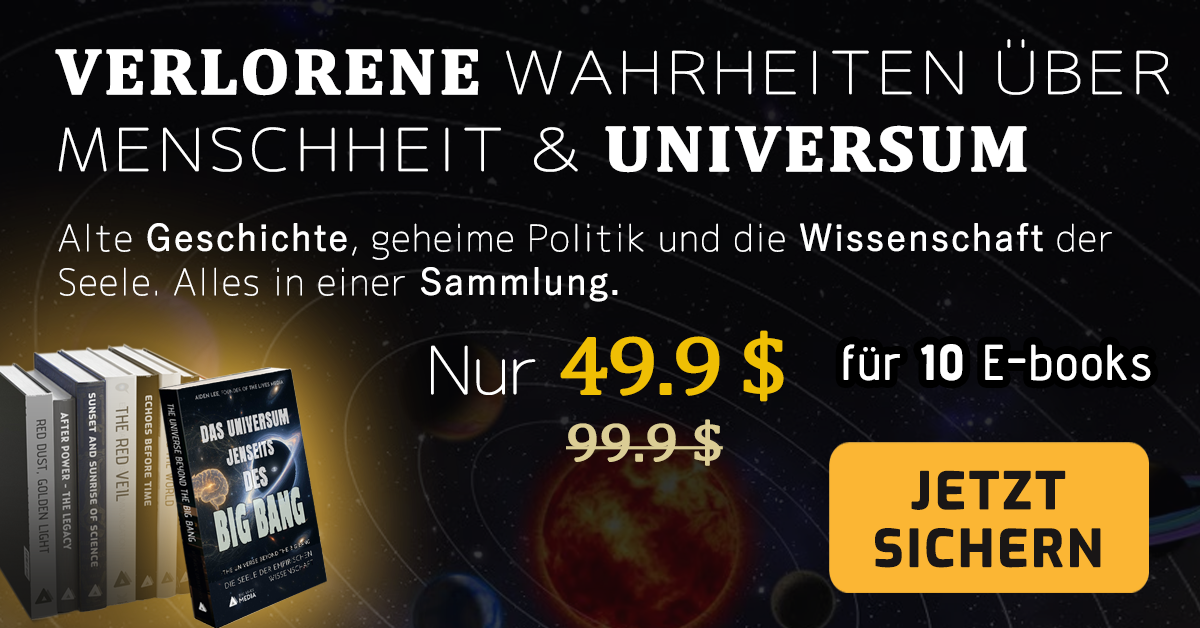
<style>
.page{position:relative;width:1200px;height:628px}
.page>*{position:absolute;margin:0}
.t1{font:57.6px/77px "Chogokuboso-Gothic";letter-spacing:0.025em;color:#ffffff;font-weight:bold;scale:1.22 1}
.t2{font:64.8px/77px "Cambria-Bold";letter-spacing:0.025em;color:#ffffff;font-weight:bold;scale:1.09 1}
.t3{font:36px/44px "Chogokuboso-Gothic";letter-spacing:0.025em;color:#ffffff;font-weight:bold}
.t4{font:36px/44px "YuGothic-Regular";letter-spacing:0.025em;color:#ffffff;font-weight:bold}
.t5{font:82.8px "Cambria";letter-spacing:-0.05em;color:#efbf04;font-weight:bold;scale:1.11 1}
.t6{font:64.8px "Chogokuboso-Gothic";letter-spacing:-0.05em;color:#ffffff;font-weight:bold;scale:1.11 1}
.t7{font:48px "AdventPro-Regular";letter-spacing:0.05em;color:#ffffff;font-weight:bold}
.t8{font:48px "AdventPro-Bold";letter-spacing:0.05em;color:#ffffff;font-weight:bold}
.t9{font:54px "Cambria";letter-spacing:-0.025em;color:#dbcd95;font-weight:bold;scale:1.11 1}
.t10{font:50.3px/57.5px "Exo-Bold";letter-spacing:0.05em;color:#191616;font-weight:bold}
</style>
<div class="page">
<p class="t1" style="left:55px;top:39px;width:1115px;height:134px"><span class="t2">VERLORENE </span>WAHRHEITEN ÜBER MENSCHHEIT &amp; <span class="t2">UNIVERSUM</span></p>
<p class="t3" style="left:58px;top:223px;width:1054px;height:79px">Alte <span class="t4">Geschichte</span>, geheime Politik und die <span class="t4">Wissenschaft</span> der Seele. Alles in einer <span class="t4">Sammlung.</span></p>
<p class="t5" style="left:431px;top:330px;width:353px;height:72px"><span class="t6">Nur </span>49.9 $</p>
<p class="t7" style="left:843px;top:344px;width:308px;height:37px">für <span class="t8">10</span> E-books</p>
<p class="t9" style="left:566px;top:419px;width:157px;height:47px">99.9 $</p>
<p class="t10" style="left:875px;top:470px;width:226px;height:98px;text-align:center">JETZT SICHERN</p>
</div>
